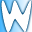
<style>
.page{position:relative;width:32px;height:32px;background:#ffffff}
.page>*{position:absolute;margin:0}
.t1{font:30px "NuWaveCondensedRegularSWFTE";color:#ffffff}
</style>
<div class="page">
<p class="t1" style="left:1px;top:0px;width:31px;height:32px">W</p>
</div>
